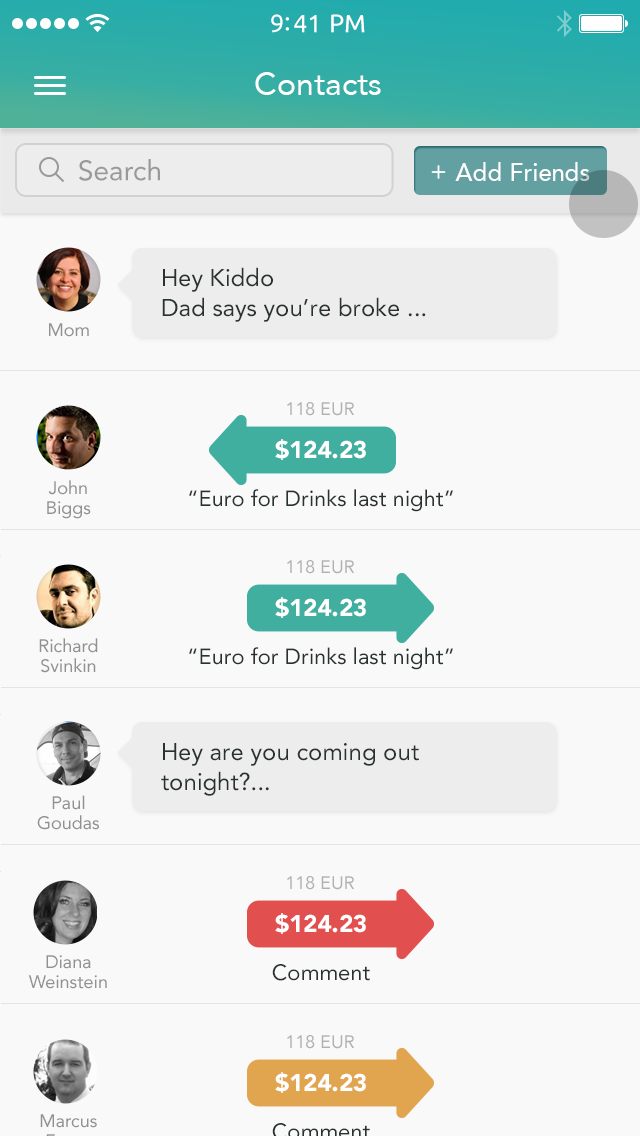
<style>
.page{position:relative;width:640px;height:1136px;background:#f9f9f9}
.page>*{position:absolute;margin:0}
.t1{font:25px "Ubuntu";color:#ffffff}
.t2{font:32px "Avenir-Roman";color:#ffffff}
.t3{font:28px "Avenir-Roman";color:#999999}
.t4{font:24px "Avenir-Medium";color:#ffffff}
.t5{font:24px/30px "Avenir-Roman";color:#2a3231}
.t6{font:18px "Avenir-Roman";color:#919191}
.t7{font:18px "Avenir-Roman";color:#b0b2b2}
.t8{font:24px "Avenir-Black";color:#ffffff}
.t9{font:18px/20px "Avenir-Roman";color:#919191}
.t10{font:22px "Avenir-Roman";color:#2a3231}
</style>
<div class="page">
<p class="t1" style="left:271px;top:14px;width:94px;height:19px">9:41 PM</p>
<p class="t2" style="left:255px;top:72px;width:126px;height:23px">Contacts</p>
<p class="t3" style="left:79px;top:159px;width:81px;height:22px">Search</p>
<p class="t4" style="left:455px;top:162px;width:135px;height:19px">Add Friends</p>
<p class="t5" style="left:162px;top:267px;width:264px;height:55px">Hey Kiddo<br>Dad says you’re broke ...</p>
<p class="t6" style="left:49px;top:323px;width:40px;height:14px">Mom</p>
<p class="t7" style="left:287px;top:402px;width:67px;height:14px">118 EUR</p>
<p class="t8" style="left:275px;top:439px;width:91px;height:21px">$124.23</p>
<p class="t9" style="left:47px;top:480px;width:44px;height:39px;text-align:center">John Biggs</p>
<p class="t10" style="left:189px;top:489px;width:264px;height:23px">“Euro for Drinks last night”</p>
<p class="t7" style="left:287px;top:560px;width:67px;height:14px">118 EUR</p>
<p class="t8" style="left:275px;top:597px;width:91px;height:21px">$124.23</p>
<p class="t9" style="left:39px;top:638px;width:59px;height:35px;text-align:center">Richard Svinkin</p>
<p class="t10" style="left:189px;top:647px;width:264px;height:23px">“Euro for Drinks last night”</p>
<p class="t5" style="left:161px;top:743px;width:258px;height:53px">Hey are you coming out tonight?...</p>
<p class="t9" style="left:37px;top:795px;width:62px;height:35px;text-align:center">Paul Goudas</p>
<p class="t7" style="left:287px;top:876px;width:67px;height:14px">118 EUR</p>
<p class="t8" style="left:275px;top:913px;width:91px;height:21px">$124.23</p>
<p class="t9" style="left:28px;top:955px;width:79px;height:34px;text-align:center">Diana Weinstein</p>
<p class="t10" style="left:272px;top:964px;width:98px;height:17px">Comment</p>
<p class="t7" style="left:287px;top:1035px;width:67px;height:14px">118 EUR</p>
<p class="t8" style="left:275px;top:1072px;width:91px;height:21px">$124.23</p>
</div>
